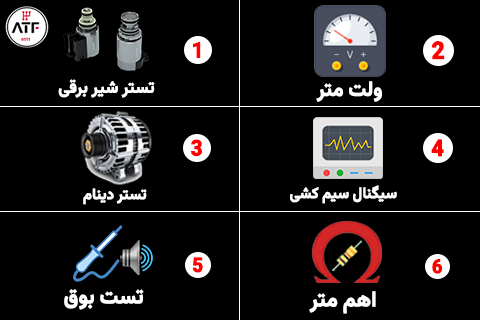
<style>
.page{position:relative;width:480px;height:320px;background:#000000}
.page>*{position:absolute;margin:0}
.t1{font:21.7px "Vazirmatn-ExtraBold";letter-spacing:-0.01em;color:#ff0000;font-weight:bold;scale:0.94 1}
.t2{font:24.1px "Vazirmatn-ExtraBold";letter-spacing:-0.01em;color:#ff0000;font-weight:bold;scale:0.94 1}
.t3{font:16.9px "Vazirmatn-Bold";letter-spacing:-0.01em;color:#fffefe;font-weight:bold;scale:0.95 1}
.t4{font:20.8px "Vazirmatn-Bold";letter-spacing:-0.01em;color:#ffffff;font-weight:bold;scale:0.94 1}
.t5{font:23.3px "Vazirmatn-ExtraBold";letter-spacing:-0.01em;color:#ff0000;font-weight:bold;scale:0.94 1}
.t6{font:15.5px "Vazirmatn-Bold";letter-spacing:-0.01em;color:#ffffff;font-weight:bold;scale:0.93 1}
.t7{font:15.4px "Vazirmatn-Bold";letter-spacing:-0.01em;color:#ffffff;font-weight:bold;scale:0.94 1}
.t8{font:20.2px "Vazirmatn-ExtraBold";letter-spacing:-0.01em;color:#ff0000;font-weight:bold;scale:0.94 1}
.t9{font:19.4px "Vazirmatn-ExtraBold";letter-spacing:-0.01em;color:#ff0000;font-weight:bold;scale:0.94 1}
.t10{font:21.7px "Vazirmatn-Bold";letter-spacing:-0.01em;color:#ffffff;font-weight:bold;scale:0.94 1}
</style>
<div class="page">
<p class="t1" style="left:193px;top:41px;width:8px;height:17px">1</p>
<p class="t2" style="left:431px;top:41px;width:14px;height:19px">2</p>
<p class="t3" style="left:58px;top:79px;width:97px;height:19px">تستر شیر برقی</p>
<p class="t4" style="left:316px;top:81px;width:66px;height:21px">ولت متر</p>
<p class="t1" style="left:191px;top:139px;width:11px;height:18px">3</p>
<p class="t5" style="left:431px;top:139px;width:13px;height:18px">4</p>
<p class="t6" style="left:290px;top:185px;width:107px;height:19px">سیگنال سیم کشی</p>
<p class="t7" style="left:83px;top:188px;width:64px;height:17px">تستر دینام</p>
<p class="t8" style="left:192px;top:257px;width:11px;height:16px">5</p>
<p class="t9" style="left:432px;top:259px;width:11px;height:15px">6</p>
<p class="t10" style="left:64px;top:289px;width:80px;height:21px">تست بوق</p>
<p class="t10" style="left:309px;top:291px;width:67px;height:23px">اهم متر</p>
</div>
